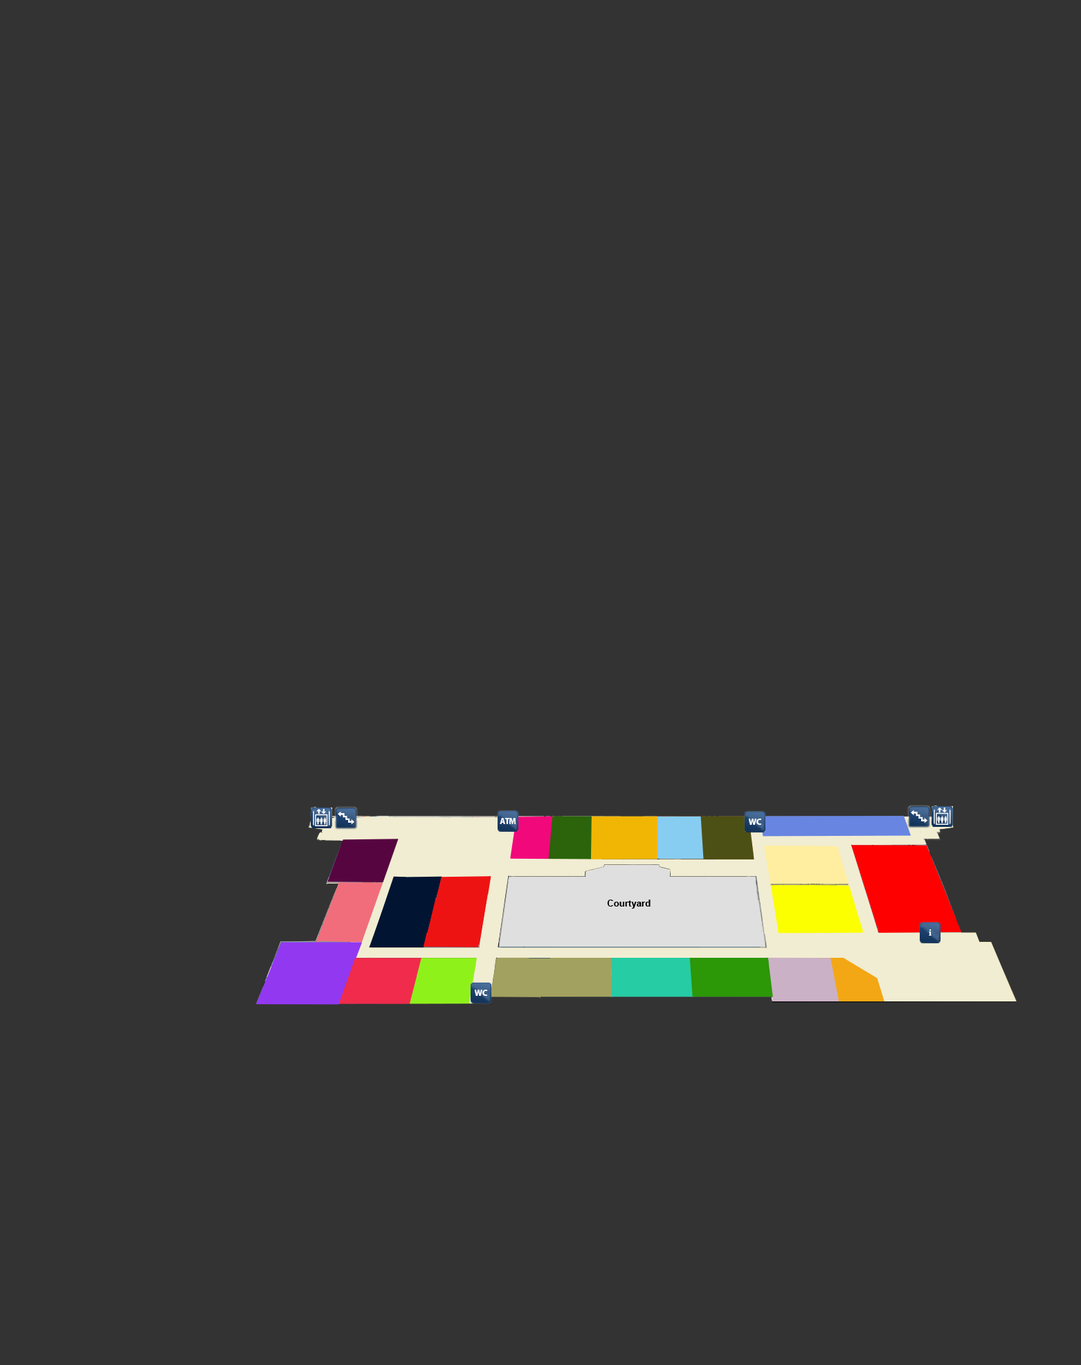
<style>
.page{position:relative;width:1081px;height:1365px;background:#333333}
.page>*{position:absolute;margin:0}
.t1{font:8.3px "MyriadPro-Bold";color:#ffffff}
.t2{font:9px "MyriadPro-Bold";color:#ffffff}
.t3{font:9px "Cambria-Bold";color:#ffffff}
</style>
<div class="page">
<p class="t1" style="left:500px;top:818px;width:16px;height:6px">ATM</p>
<p class="t2" style="left:748px;top:818px;width:14px;height:7px">WC</p>
<p class="t3" style="left:929px;top:929px;width:3px;height:6px">i</p>
<p class="t2" style="left:474px;top:989px;width:14px;height:7px">WC</p>
</div>
